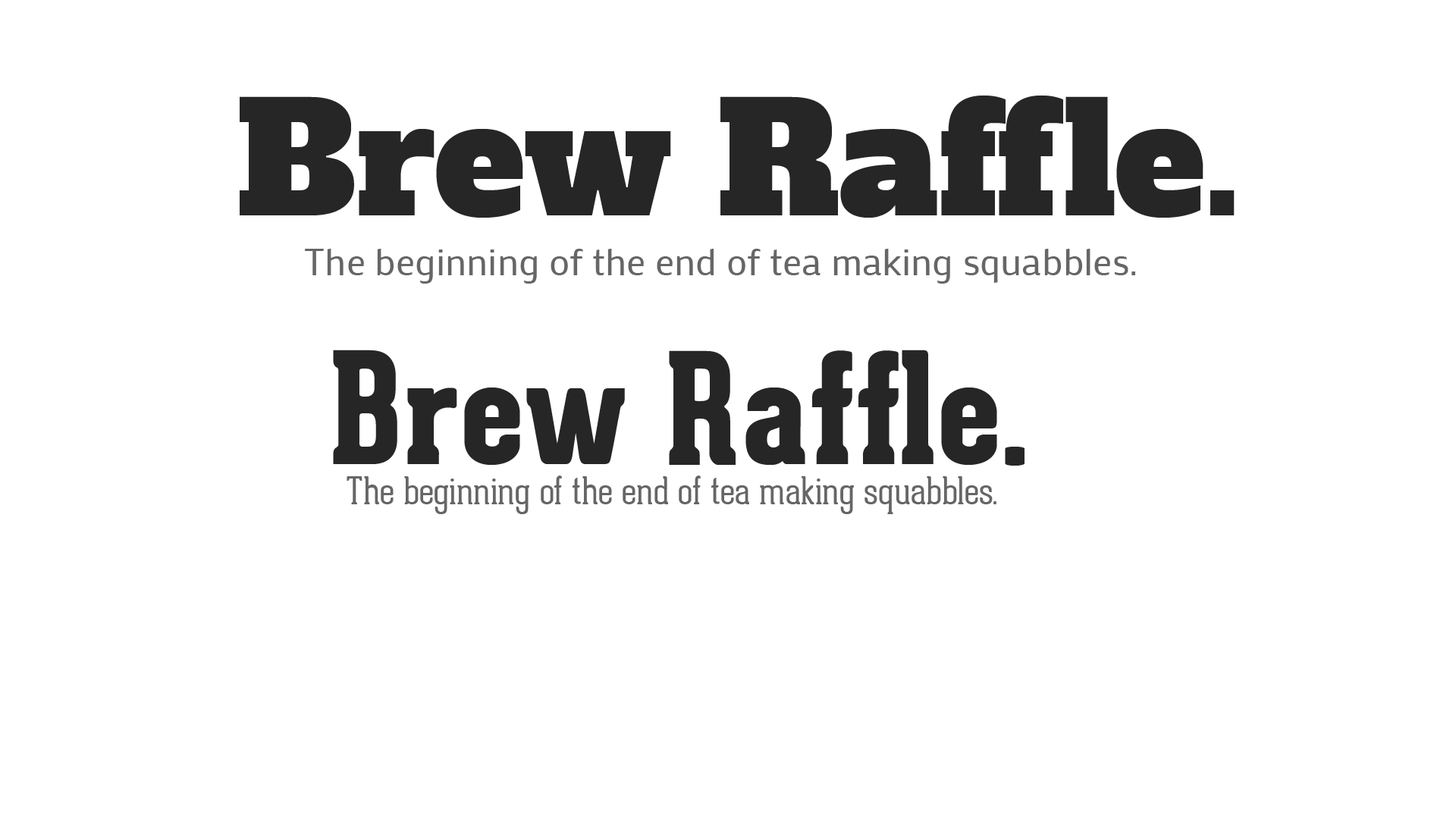
<style>
.page{position:relative;width:1456px;height:819px;background:#ffffff}
.page>*{position:absolute;margin:0}
.t1{font:151.7px "AlfaSlabOne-Regular";color:#262626}
.t2{font:37.9px "Mako";color:#666666}
.t3{font:151.7px "GearedSlab-Extrabold";color:#262626}
.t4{font:37.9px "GearedSlab-Thin";color:#666666}
</style>
<div class="page">
<p class="t1" style="left:240px;top:95px;width:995px;height:123px">Brew Raffle.</p>
<p class="t2" style="left:305px;top:249px;width:830px;height:35px">The beginning of the end of tea making squabbles.</p>
<p class="t3" style="left:333px;top:350px;width:691px;height:116px">Brew Raffle.</p>
<p class="t4" style="left:347px;top:475px;width:649px;height:39px">The beginning of the end of tea making squabbles.</p>
</div>
